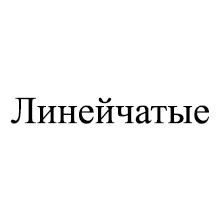
<style>
.page{position:relative;width:221px;height:221px;background:#ffffff}
.page>*{position:absolute;margin:0}
.t1{font:38.3px "TimesNewRomanPSMT";color:#000000}
</style>
<div class="page">
<p class="t1" style="left:10px;top:97px;width:199px;height:27px">Линейчатые</p>
</div>
